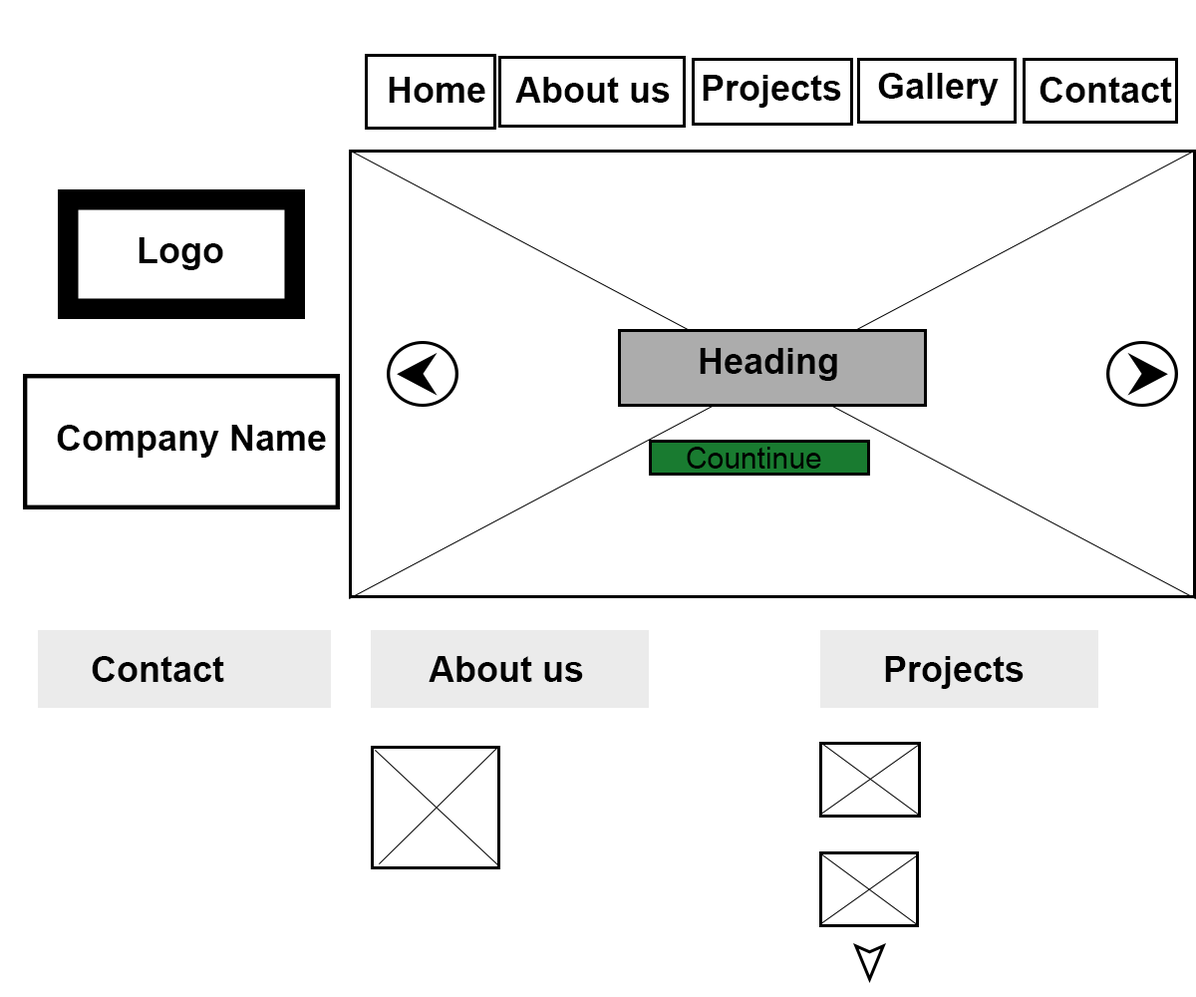
<style>
.page{position:relative;width:1196px;height:997px;background:#ffffff}
.page>*{position:absolute;margin:0}
.t1{font:35.9px "Arial-BoldMT";color:#000000}
.t2{font:29.9px "ArialMT";color:#000000}
</style>
<div class="page">
<p class="t1" style="left:389px;top:77px;width:96px;height:26px">Home</p>
<p class="t1" style="left:515px;top:77px;width:155px;height:26px">About us</p>
<p class="t1" style="left:703px;top:75px;width:138px;height:33px">Projects</p>
<p class="t1" style="left:878px;top:73px;width:121px;height:33px">Gallery</p>
<p class="t1" style="left:1040px;top:77px;width:132px;height:26px">Contact</p>
<p class="t1" style="left:139px;top:237px;width:84px;height:33px">Logo</p>
<p class="t1" style="left:700px;top:348px;width:137px;height:33px">Heading</p>
<p class="t1" style="left:57px;top:425px;width:269px;height:33px">Company Name</p>
<p class="t2" style="left:687px;top:447px;width:134px;height:22px">Countinue</p>
<p class="t1" style="left:92px;top:656px;width:132px;height:26px">Contact</p>
<p class="t1" style="left:429px;top:656px;width:154px;height:26px">About us</p>
<p class="t1" style="left:885px;top:656px;width:139px;height:33px">Projects</p>
</div>
